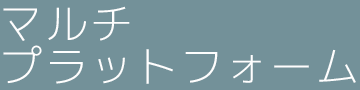
<style>
.page{position:relative;width:360px;height:90px;background:#739199}
.page>*{position:absolute;margin:0}
.t1{font:43px/43px "mplus-1c-light";letter-spacing:0.05em;color:#fefefe}
</style>
<div class="page">
<p class="t1" style="left:3px;top:6px;width:353px;height:78px">マルチ<br>プラットフォーム</p>
</div>
